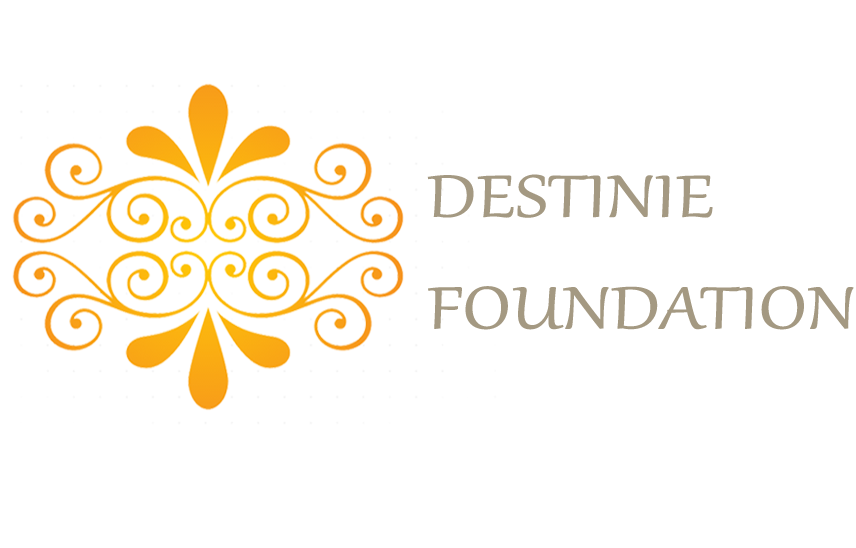
<style>
.page{position:relative;width:856px;height:548px;background:#ffffff}
.page>*{position:absolute;margin:0}
.t1{font:72.5px/111.6px "Gabriola";letter-spacing:-0.014em;color:#a49982;text-transform:uppercase;font-weight:bold;scale:1.23 1}
</style>
<div class="page">
<p class="t1" style="left:427px;top:174px;width:427px;height:156px">Destinie<br>foundation</p>
</div>
